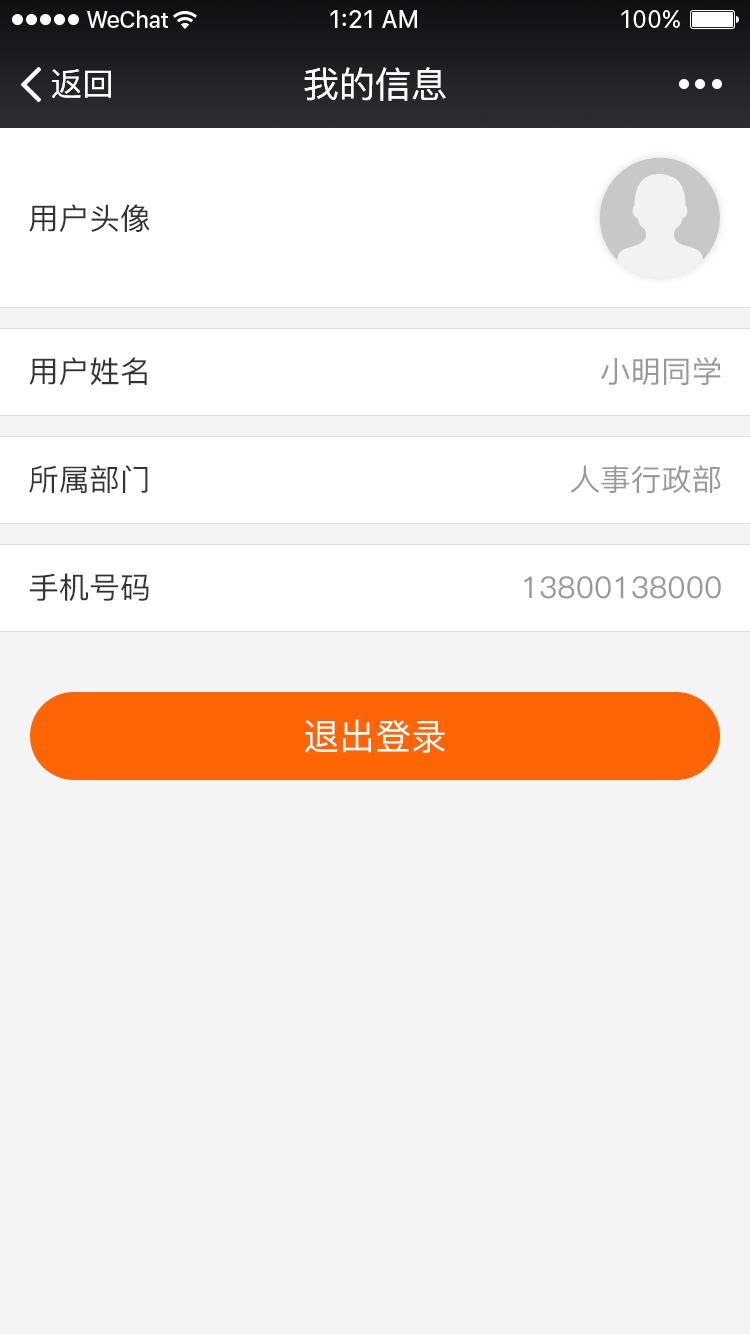
<style>
.page{position:relative;width:750px;height:1334px;background:#f4f4f4}
.page>*{position:absolute;margin:0}
.t1{font:32px "PingFang-SC-Medium";color:#ffffff}
.t2{font:36px "PingFang-SC-Medium";color:#ffffff}
.t3{font:30px "PingFang-SC-Medium";color:#323232}
.t4{font:30px "PingFang-SC-Medium";color:#333333}
.t5{font:30px "PingFang-SC-Medium";color:#999999}
</style>
<div class="page">
<p class="t1" style="left:52px;top:69px;width:59px;height:30px">返回</p>
<p class="t2" style="left:304px;top:67px;width:142px;height:34px">我的信息</p>
<p class="t3" style="left:29px;top:204px;width:121px;height:28px">用户头像</p>
<p class="t4" style="left:29px;top:357px;width:118px;height:28px">用户姓名</p>
<p class="t5" style="left:601px;top:357px;width:120px;height:28px">小明同学</p>
<p class="t4" style="left:29px;top:465px;width:119px;height:28px">所属部门</p>
<p class="t5" style="left:570px;top:465px;width:151px;height:28px">人事行政部</p>
<p class="t4" style="left:29px;top:573px;width:120px;height:28px">手机号码</p>
<p class="t5" style="left:524px;top:576px;width:197px;height:23px">13800138000</p>
<p class="t2" style="left:305px;top:719px;width:140px;height:34px">退出登录</p>
</div>
